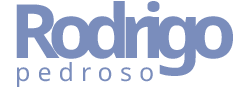
<style>
.page{position:relative;width:250px;height:89px;background:#ffffff}
.page>*{position:absolute;margin:0}
.t1{font:75px "NotoSans-Bold";letter-spacing:-0.15em;color:#7a8dbc}
.t2{font:25px "NotoSans-Regular";letter-spacing:0.28em;color:#7a8dbc}
</style>
<div class="page">
<p class="t1" style="left:16px;top:1px;width:217px;height:75px">Rodrigo</p>
<p class="t2" style="left:17px;top:62px;width:136px;height:25px">pedroso</p>
</div>
